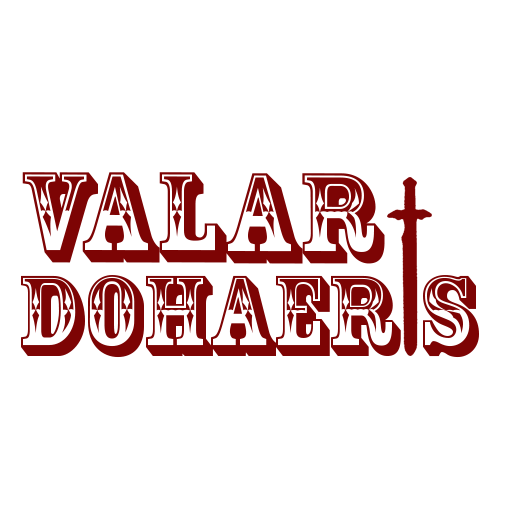
<style>
.page{position:relative;width:512px;height:512px;background:#ffffff}
.page>*{position:absolute;margin:0}
.t1{font:120px "RosewoodStd-Regular";color:#7d0404;scale:1.05 1}
.t2{font:106.9px "RosewoodStd-Regular";color:#7d0404}
</style>
<div class="page">
<p class="t1" style="left:22px;top:172px;width:363px;height:92px">VALAR</p>
<p class="t2" style="left:21px;top:275px;width:458px;height:83px">DOHAER S</p>
</div>
